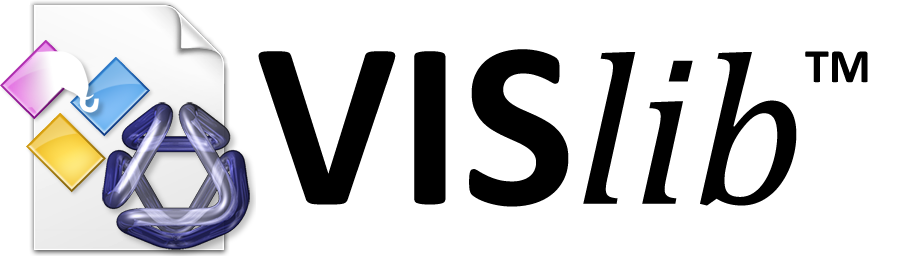
<style>
.page{position:relative;width:900px;height:256px;background:#ffffff}
.page>*{position:absolute;margin:0}
.t1{font:240px "Calibri-Bold";color:#000000}
.t2{font:217px "Cambria-Italic";color:#000000}
.t3{font:48px "Calibri-Bold";color:#000000}
</style>
<div class="page">
<p class="t1" style="left:258px;top:49px;width:539px;height:158px">VIS<span class="t2">lib</span></p>
<p class="t3" style="left:805px;top:51px;width:63px;height:32px">TM</p>
</div>
